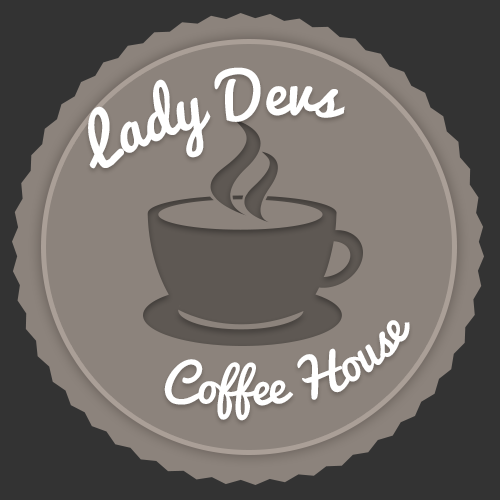
<style>
.page{position:relative;width:500px;height:500px;background:#8c837c}
.page>*{position:absolute;margin:0}
.t1{font:60.5px "Pacifico";color:#ffffff}
.t2{font:48.3px "Pacifico";color:#ffffff}
</style>
<div class="page">
<p class="t1" style="left:88px;top:67px;width:257px;height:102px;rotate:-14deg">Lady Devs</p>
<p class="t2" style="left:164px;top:320px;width:246px;height:101px;rotate:-15deg">Coffee House</p>
</div>
